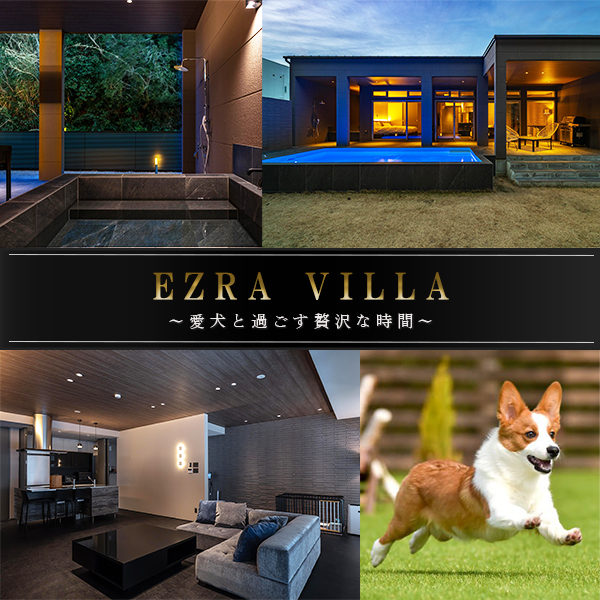
<style>
.page{position:relative;width:600px;height:600px}
.page>*{position:absolute;margin:0}
.t1{font:36px "HGSMinchoE";letter-spacing:0.3em}
.t2{font:16px "VDL-V7Mincho-Light";letter-spacing:0.3em;color:#ede8e8}
</style>
<div class="page">
<p class="t1" style="left:153px;top:272px;width:296px;height:28px">EZRA VILLA</p>
<p class="t2" style="left:169px;top:313px;width:263px;height:16px">～愛犬と過ごす贅沢な時間～</p>
</div>
